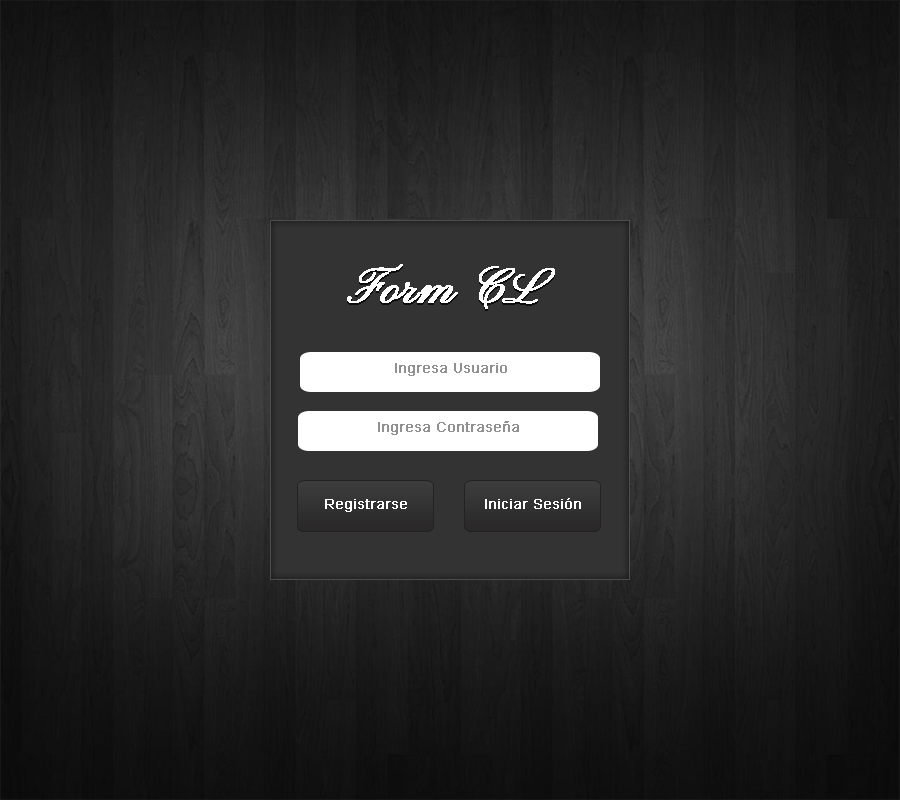
<style>
.page{position:relative;width:900px;height:800px}
.page>*{position:absolute;margin:0}
.t1{font:50px "PinyonScript";color:#ffffff;font-weight:bold}
.t2{font:14px "ArialMT";color:#919191;font-weight:bold}
.t3{font:14px "ArialMT";color:#ffffff;font-weight:bold}
</style>
<div class="page">
<p class="t1" style="left:347px;top:264px;width:208px;height:45px">Form CL</p>
<p class="t2" style="left:395px;top:363px;width:112px;height:13px">Ingresa Usuario</p>
<p class="t2" style="left:378px;top:421px;width:141px;height:14px">Ingresa Contraseña</p>
<p class="t3" style="left:325px;top:499px;width:82px;height:13px">Registrarse</p>
<p class="t3" style="left:485px;top:498px;width:96px;height:11px">Iniciar Sesión</p>
</div>
